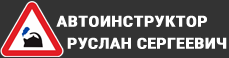
<style>
.page{position:relative;width:229px;height:58px;background:#333333}
.page>*{position:absolute;margin:0}
.t1{font:15.1px "RobotoCondensed-Bold";color:#ffffff;font-weight:bold;scale:1.19 1}
.t2{font:15.1px "RobotoCondensed-Bold";letter-spacing:-0.01em;color:#ffffff;font-weight:bold;scale:1.19 1}
</style>
<div class="page">
<p class="t1" style="left:56px;top:15px;width:151px;height:12px">АВТОИНСТРУКТОР</p>
<p class="t2" style="left:67px;top:37px;width:160px;height:12px">РУСЛАН СЕРГЕЕВИЧ</p>
</div>
